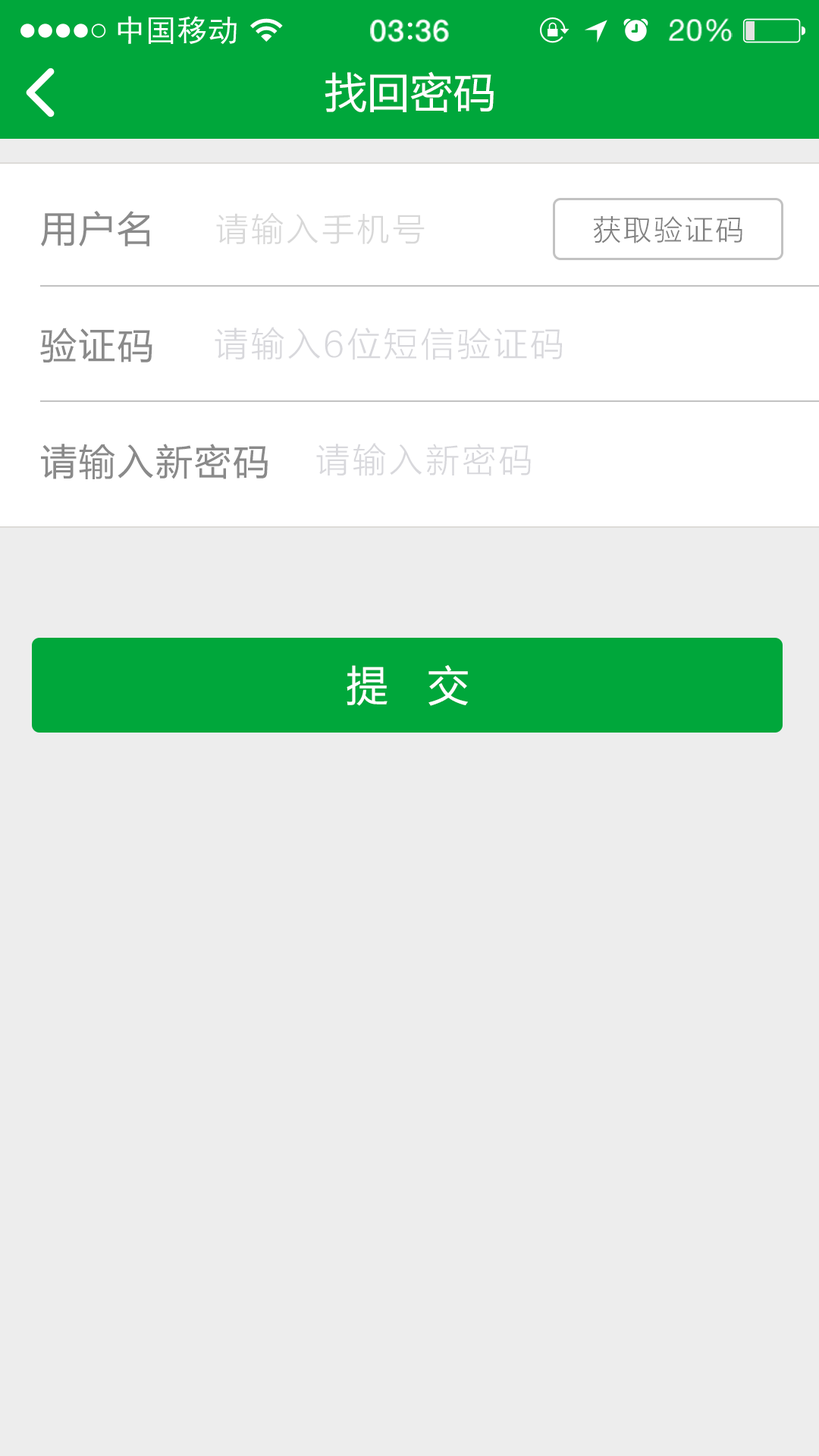
<style>
.page{position:relative;width:819px;height:1456px;background:#ededed}
.page>*{position:absolute;margin:0}
.t1{font:41.7px "MicrosoftYaHei";letter-spacing:0.02em;color:#ffffff}
.t2{font:36.4px "MicrosoftYaHei";letter-spacing:0.06em;color:#8a8a8a}
.t3{font:33.5px "FZLTXHK";letter-spacing:0.06em;color:#d8d8d8}
.t4{font:29.4px "FZLTXHK";letter-spacing:0.06em;color:#818181}
.t5{font:34.9px "FZLTXHK";letter-spacing:0.06em;color:#d8d8dc}
</style>
<div class="page">
<p class="t1" style="left:325px;top:71px;width:169px;height:41px">找回密码</p>
<p class="t2" style="left:41px;top:211px;width:108px;height:35px">用户名</p>
<p class="t3" style="left:216px;top:213px;width:209px;height:32px">请输入手机号</p>
<p class="t4" style="left:593px;top:216px;width:149px;height:27px">获取验证码</p>
<p class="t2" style="left:40px;top:328px;width:112px;height:34px">验证码</p>
<p class="t5" style="left:215px;top:327px;width:347px;height:33px">请输入6位短信验证码</p>
<p class="t2" style="left:41px;top:444px;width:227px;height:35px">请输入新密码</p>
<p class="t5" style="left:316px;top:443px;width:215px;height:33px">请输入新密码</p>
<p class="t1" style="left:347px;top:665px;width:121px;height:41px">提   交</p>
</div>
